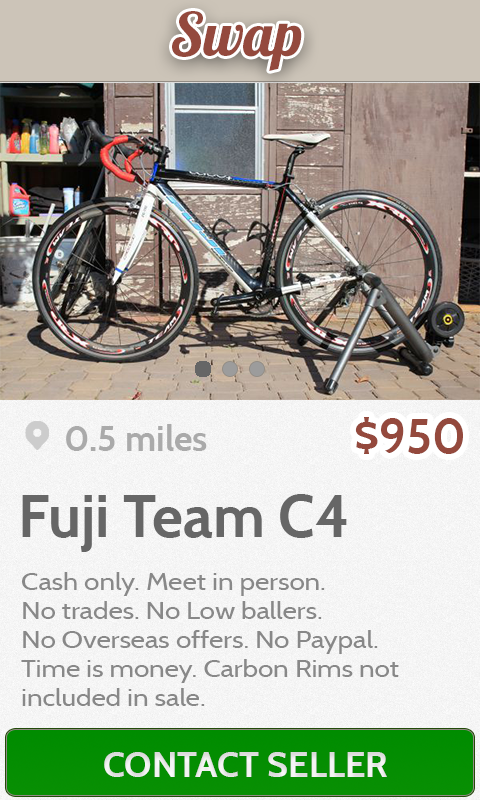
<style>
.page{position:relative;width:480px;height:800px}
.page>*{position:absolute;margin:0}
.t1{font:60px "Lobster1.4";color:#94493d}
.t2{font:36px "Cabin-Bold";color:#aaaaaa}
.t3{font:48px "Cabin-Bold";color:#94493d}
.t4{font:60px "Cabin-Bold";color:#666666}
.t5{font:24px "Cabin-Regular";color:#888888;scale:1.15 1}
.t6{font:36px "Cabin-Bold";color:#e9e9e9}
</style>
<div class="page">
<p class="t1" style="left:172px;top:11px;width:130px;height:60px">Swap</p>
<p class="t2" style="left:66px;top:424px;width:141px;height:27px">0.5 miles</p>
<p class="t3" style="left:355px;top:417px;width:108px;height:37px">$950</p>
<p class="t4" style="left:22px;top:494px;width:325px;height:58px">Fuji Team C4</p>
<p class="t5" style="left:21px;top:572px;width:378px;height:134px">Cash only. Meet in person. <br>No trades. No Low ballers. <br>No Overseas offers. No Paypal. <br>Time is money. Carbon Rims not <br>included in sale.</p>
<p class="t6" style="left:104px;top:752px;width:283px;height:25px">CONTACT SELLER</p>
</div>
